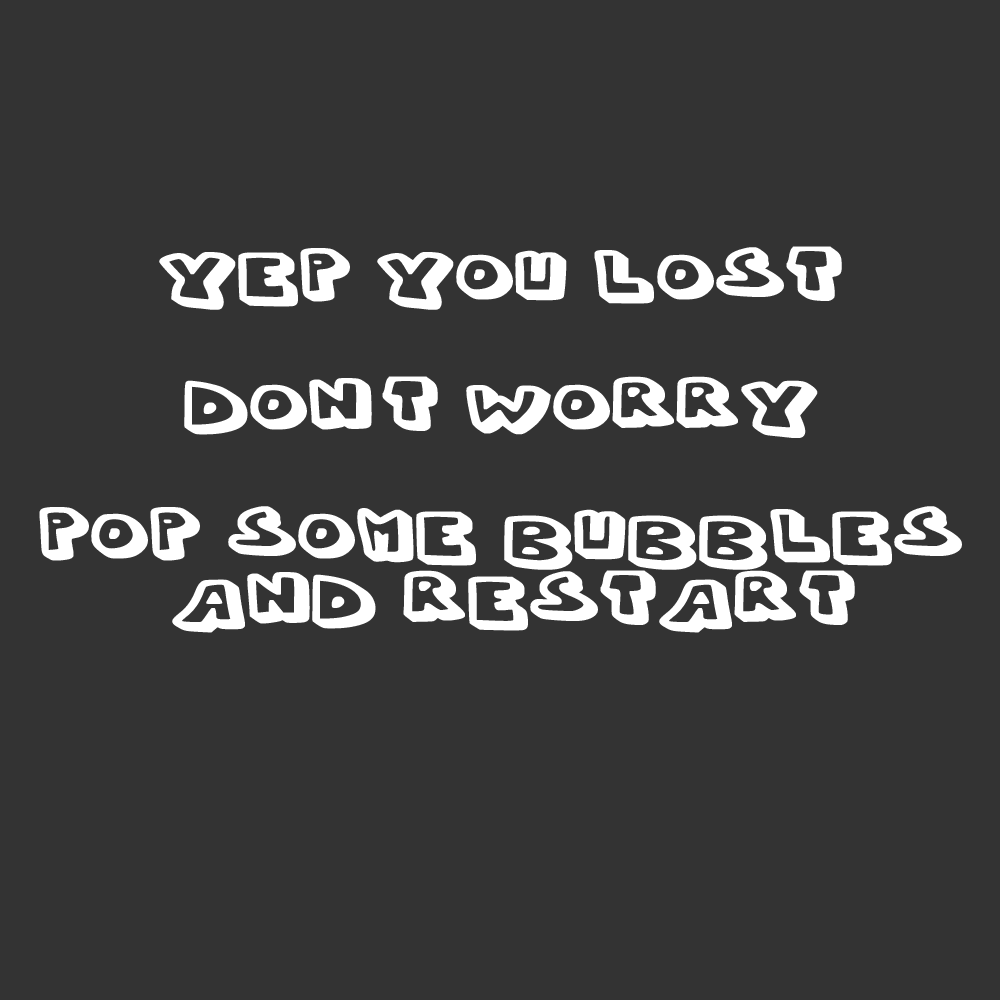
<style>
.page{position:relative;width:1000px;height:1000px;background:#333333}
.page>*{position:absolute;margin:0}
.t1{font:75px/54.2px "Whypo";color:#ffffff;font-weight:bold;scale:1.24 1}
</style>
<div class="page">
<p class="t1" style="left:39px;top:246px;width:923px;height:387px;text-align:center">Yep You lost<br><br>don't worry<br><br>pop some bubbles<br> and restart</p>
</div>
